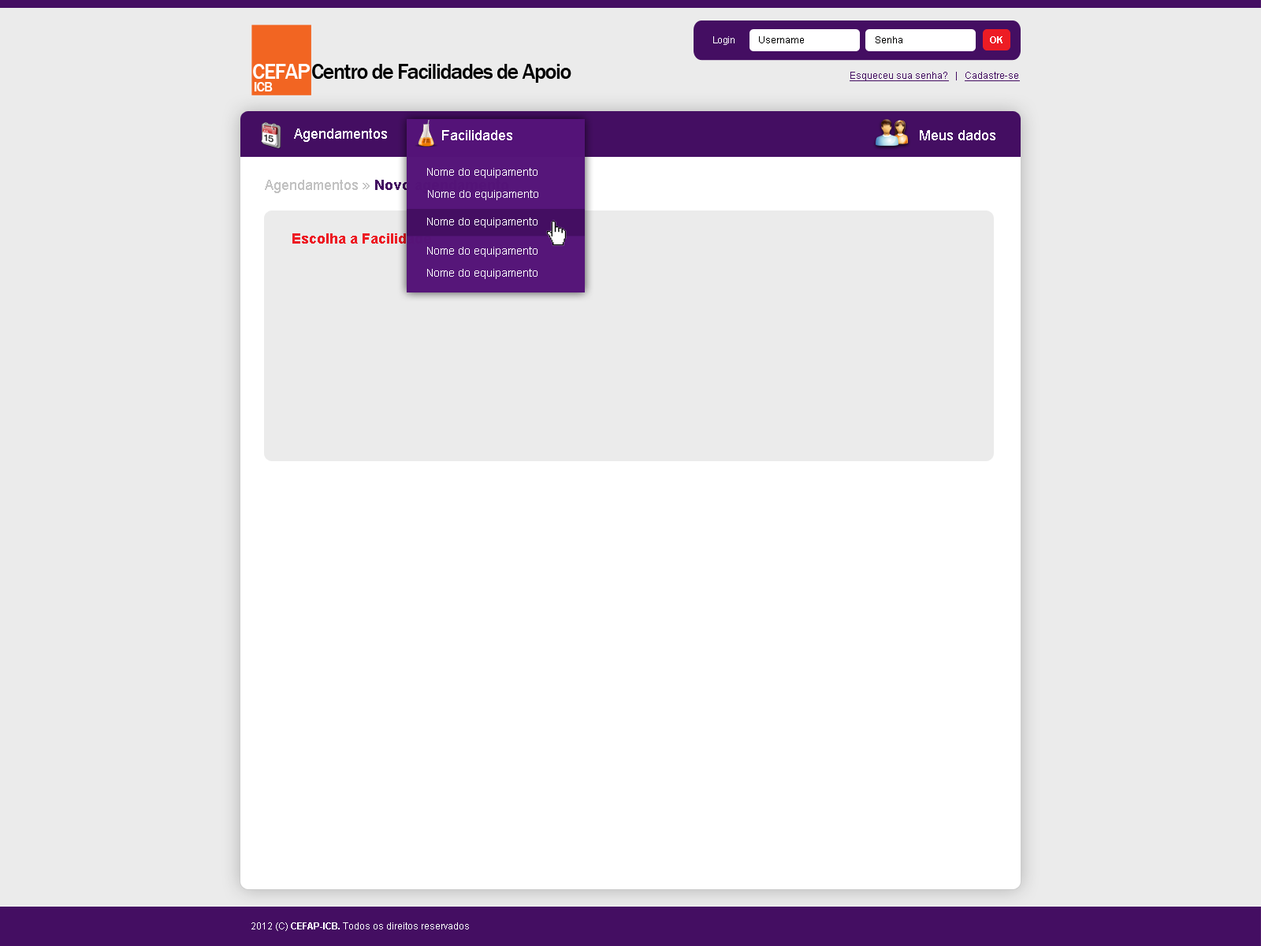
<style>
.page{position:relative;width:1261px;height:946px;background:#ebebeb}
.page>*{position:absolute;margin:0}
.t1{font:9.5px "ArialMT";letter-spacing:-0.05em;color:#ffffff}
.t2{font:9.5px "ArialMT";color:#000000}
.t3{font:9.5px "Arial-BoldMT";color:#ffffff}
.t4{font:22.1px "FranklinGothic-Medium";letter-spacing:-0.05em;color:#ffffff}
.t5{font:22.1px "FranklinGothic-Medium";letter-spacing:-0.05em;color:#000000}
.t6{font:9.5px "ArialMT";color:#440e62;text-decoration:underline}
.t7{font:9.5px "ArialMT";color:#440e62}
.t8{font:14.1px "FranklinGothic-Medium";letter-spacing:-0.05em;color:#ffffff}
.t9{font:14.2px "ArialMT";color:#ffffff}
.t10{font:11px "ArialMT";color:#fefefe}
.t11{font:14.2px "Arial-BoldMT";color:#440e62}
.t12{font:14.2px "ArialMT";color:#c2c2c2}
.t13{font:14.2px "Arial-BoldMT";color:#ed1c24}
.t14{font:9.5px "ArialMT";color:#ffffff}
</style>
<div class="page">
<p class="t1" style="left:713px;top:36px;width:21px;height:9px">Login</p>
<p class="t2" style="left:759px;top:36px;width:45px;height:7px">Username</p>
<p class="t2" style="left:876px;top:36px;width:26px;height:7px">Senha</p>
<p class="t3" style="left:990px;top:36px;width:12px;height:7px">OK</p>
<p class="t4" style="left:253px;top:64px;width:58px;height:15px">CEFAP</p>
<p class="t5" style="left:312px;top:64px;width:259px;height:19px">Centro de Facilidades de Apoio</p>
<p class="t6" style="left:850px;top:72px;width:170px;height:9px">Esqueceu sua senha?<span class="t7">   |   </span>Cadastre-se</p>
<p class="t8" style="left:254px;top:82px;width:19px;height:9px">ICB</p>
<p class="t9" style="left:294px;top:128px;width:93px;height:14px">Agendamentos</p>
<p class="t9" style="left:442px;top:130px;width:70px;height:10px">Facilidades</p>
<p class="t9" style="left:920px;top:130px;width:75px;height:10px">Meus dados</p>
<p class="t10" style="left:427px;top:168px;width:110px;height:10px">Nome do equipamento</p>
<p class="t11" style="left:265px;top:180px;width:243px;height:13px"><span class="t12">Agendamentos » </span>Novo agendamento</p>
<p class="t10" style="left:428px;top:190px;width:110px;height:10px">Nome do equipamento</p>
<p class="t10" style="left:427px;top:218px;width:110px;height:10px">Nome do equipamento</p>
<p class="t13" style="left:292px;top:233px;width:139px;height:11px">Escolha a Facilidade</p>
<p class="t10" style="left:427px;top:247px;width:110px;height:10px">Nome do equipamento</p>
<p class="t10" style="left:427px;top:269px;width:110px;height:10px">Nome do equipamento</p>
<p class="t14" style="left:251px;top:922px;width:218px;height:9px">2012 (C) <span class="t3">CEFAP-ICB.</span> Todos os direitos reservados</p>
</div>
